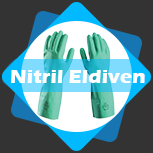
<style>
.page{position:relative;width:153px;height:153px;background:#333333}
.page>*{position:absolute;margin:0}
.t1{font:20.3px "ErasITC-Bold";color:#ffffff}
</style>
<div class="page">
<p class="t1" style="left:11px;top:70px;width:134px;height:13px">Nitril Eldiven</p>
</div>
